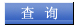
<style>
.page{position:relative;width:81px;height:27px;background:#ffffff}
.page>*{position:absolute;margin:0}
.t1{font:14px "NSimSun";letter-spacing:-0.1em;color:#ffffff}
.t2{font:14px "FangSong_GB2312";letter-spacing:-0.1em;color:#ffffff}
</style>
<div class="page">
<p class="t1" style="left:21px;top:6px;width:37px;height:14px"><span class="t2">        </span>查  询</p>
</div>
